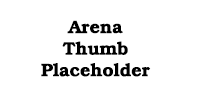
<style>
.page{position:relative;width:200px;height:100px;background:#ffffff}
.page>*{position:absolute;margin:0}
.t1{font:18px "URWBookman-Demi";color:#000000}
</style>
<div class="page">
<p class="t1" style="left:41px;top:20px;width:110px;height:57px;text-align:center">Arena<br>Thumb<br>Placeholder</p>
</div>
